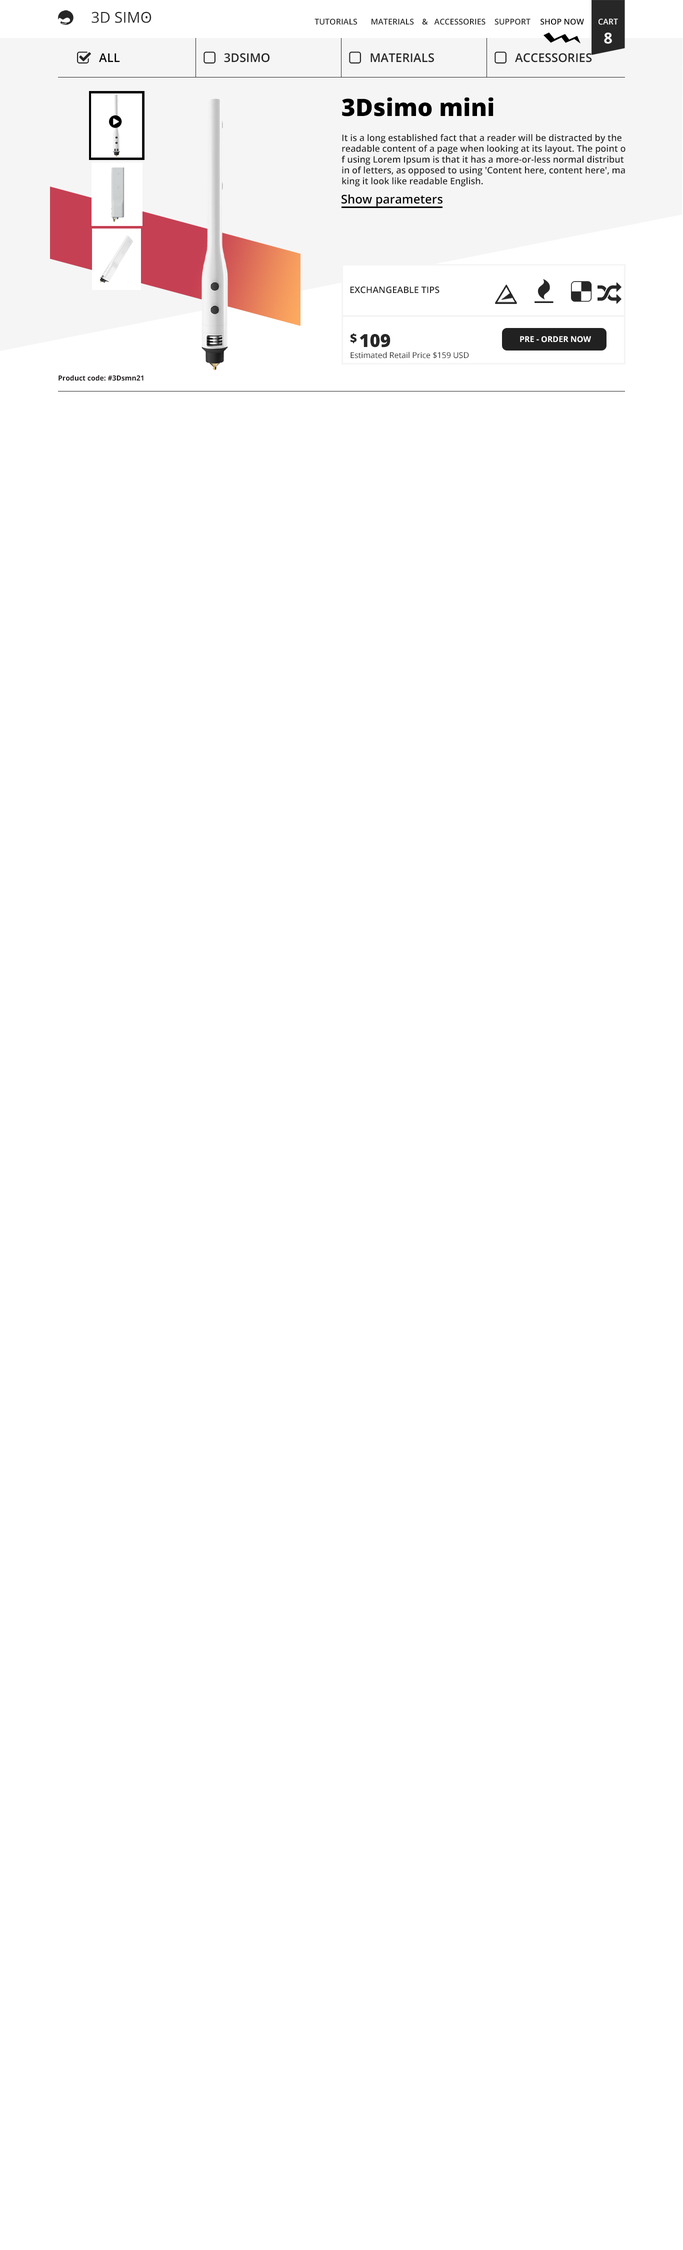
<style>
.page{position:relative;width:683px;height:2250px;background:#ffffff}
.page>*{position:absolute;margin:0}
.t1{font:15px "OpenSans";color:#262626}
.t2{font:8px "OpenSans-Semibold";color:#262626}
.t3{font:8px "OpenSans-Semibold";color:#000000}
.t4{font:8px "OpenSans-Semibold";color:#f5f5f5}
.t5{font:15px "OpenSans-Bold";color:#f5f5f5}
.t6{font:12px "OpenSans-Semibold";color:#000000}
.t7{font:12px "OpenSans-Semibold";color:#262626}
.t8{font:24px "OpenSans-Extrabold";color:#000000}
.t9{font:9px "OpenSans-Semibold";color:#272727}
.t10{font:12px "OpenSans-Extrabold";color:#272727}
.t11{font:18px "OpenSans-Extrabold";color:#272727}
.t12{font:8px "OpenSans-Bold";color:#ffffff}
.t13{font:8px "OpenSans";color:#272727}
.t14{font:7px "OpenSans-Bold";color:#1e181a}
</style>
<div class="page">
<p class="t1" style="left:92px;top:12px;width:60px;height:11px">3D SIMO</p>
<p class="t2" style="left:314px;top:18px;width:43px;height:7px">TUTORIALS</p>
<p class="t2" style="left:372px;top:18px;width:42px;height:7px">MATERIALS</p>
<p class="t2" style="left:422px;top:18px;width:6px;height:7px">&amp;</p>
<p class="t2" style="left:434px;top:18px;width:52px;height:7px">ACCESSORIES</p>
<p class="t2" style="left:494px;top:18px;width:36px;height:7px">SUPPORT</p>
<p class="t3" style="left:540px;top:18px;width:44px;height:7px">SHOP NOW</p>
<p class="t4" style="left:598px;top:18px;width:20px;height:7px">CART</p>
<p class="t5" style="left:604px;top:32px;width:8px;height:12px">8</p>
<p class="t6" style="left:99px;top:53px;width:21px;height:9px">ALL</p>
<p class="t7" style="left:224px;top:53px;width:46px;height:9px">3DSIMO</p>
<p class="t7" style="left:370px;top:53px;width:64px;height:9px">MATERIALS</p>
<p class="t7" style="left:515px;top:53px;width:77px;height:9px">ACCESSORIES</p>
<p class="t8" style="left:342px;top:97px;width:152px;height:19px">3Dsimo mini</p>
<p class="t9" style="left:342px;top:134px;width:284px;height:52px">It is a long established fact that a reader will be distracted by the <br>readable content of a page when looking at its layout. The point o<br>f using Lorem Ipsum is that it has a more-or-less normal distribut<br>in of letters, as opposed to using 'Content here, content here', ma<br>king it look like readable English.</p>
<p class="t6" style="left:342px;top:194px;width:100px;height:12px">Show parameters</p>
<p class="t9" style="left:350px;top:286px;width:90px;height:8px">EXCHANGEABLE TIPS</p>
<p class="t10" style="left:350px;top:333px;width:7px;height:11px">$</p>
<p class="t11" style="left:360px;top:334px;width:30px;height:14px">109</p>
<p class="t12" style="left:520px;top:336px;width:71px;height:6px">PRE - ORDER NOW</p>
<p class="t13" style="left:350px;top:352px;width:119px;height:6px">Estimated Retail Price $159 USD</p>
<p class="t14" style="left:58px;top:375px;width:86px;height:6px">Product code: #3Dsmn21</p>
</div>
